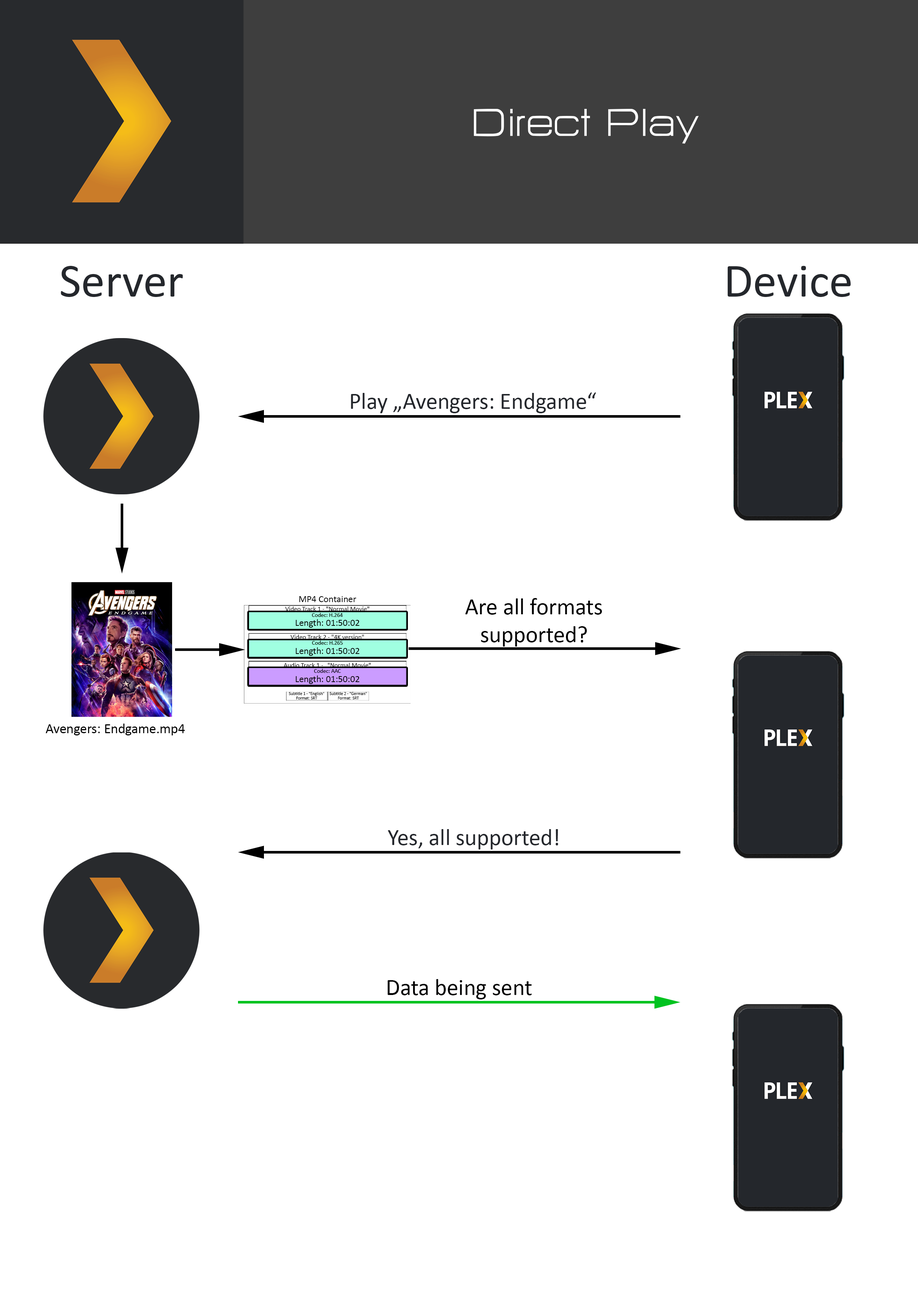
<style>
.page{position:relative;width:918px;height:1299px;background:#ffffff}
.page>*{position:absolute;margin:0}
.t1{font:47.8px "HURTMOLDPersonalUse-Regular";color:#ffffff}
.t2{font:47.8px "Calibri";color:#24272c}
.t3{font:23.1px "Calibri";color:#24272c}
.t4{font:9.5px "Calibri";color:#000000}
.t5{font:23.1px "Calibri";color:#000000}
.t6{font:6.6px "Calibri";color:#000000}
.t7{font:5.7px "Calibri";color:#000000}
.t8{font:4.3px "Calibri";color:#000000}
.t9{font:13.9px "Calibri";color:#000000}
</style>
<div class="page">
<p class="t1" style="left:474px;top:109px;width:225px;height:35px">Direct Play</p>
<p class="t2" style="left:61px;top:266px;width:122px;height:31px">Server</p>
<p class="t2" style="left:727px;top:266px;width:124px;height:31px">Device</p>
<p class="t3" style="left:351px;top:392px;width:245px;height:21px">Play „Avengers: Endgame“</p>
<p class="t4" style="left:299px;top:596px;width:58px;height:6px">MP4 Container</p>
<p class="t5" style="left:465px;top:598px;width:137px;height:48px;text-align:center">Are all formats<br>supported?</p>
<p class="t6" style="left:285px;top:606px;width:84px;height:5px">Video Track 1 - "Normal Movie"</p>
<p class="t7" style="left:312px;top:613px;width:31px;height:4px">Codec: H.264</p>
<p class="t4" style="left:296px;top:619px;width:63px;height:9px">Length: 01:50:02</p>
<p class="t6" style="left:291px;top:635px;width:73px;height:4px">Video Track 2 - "4K version"</p>
<p class="t7" style="left:312px;top:640px;width:31px;height:5px">Codec: H.265</p>
<p class="t4" style="left:296px;top:647px;width:63px;height:9px">Length: 01:50:02</p>
<p class="t6" style="left:284px;top:663px;width:87px;height:5px">Audio Track 1 - „"Normal Movie"</p>
<p class="t4" style="left:296px;top:675px;width:63px;height:9px">Length: 01:50:02</p>
<p class="t7" style="left:314px;top:669px;width:27px;height:4px">Codec: AAC</p>
<p class="t8" style="left:289px;top:692px;width:35px;height:4px">Subtitle 1 - "English"</p>
<p class="t8" style="left:296px;top:696px;width:22px;height:3px">Format: SRT</p>
<p class="t8" style="left:329px;top:692px;width:38px;height:3px">Subtitle 2 - "German"</p>
<p class="t8" style="left:338px;top:696px;width:21px;height:3px">Format: SRT</p>
<p class="t9" style="left:46px;top:723px;width:139px;height:12px">Avengers: Endgame.mp4</p>
<p class="t3" style="left:388px;top:829px;width:170px;height:20px">Yes, all supported!</p>
<p class="t5" style="left:388px;top:979px;width:144px;height:20px">Data being sent</p>
</div>
